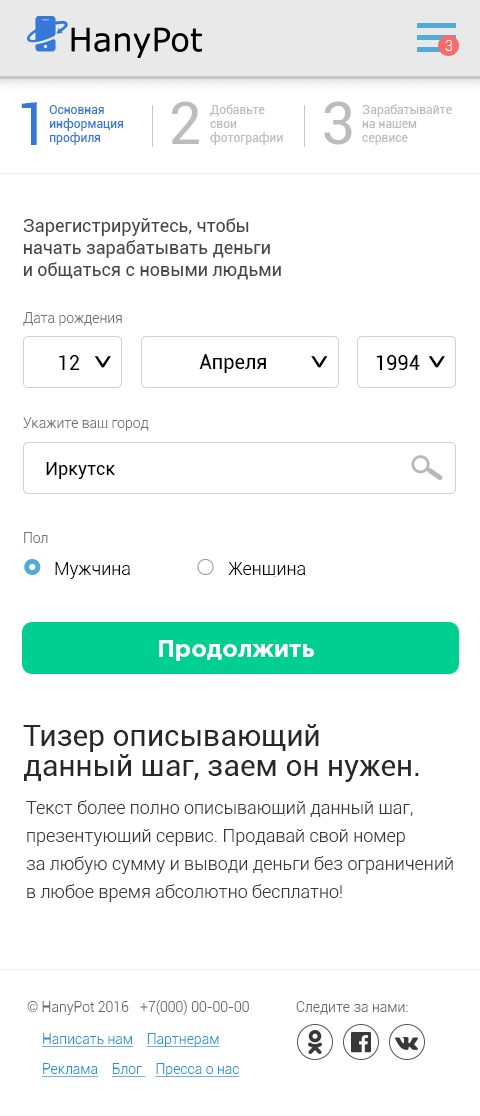
<style>
.page{position:relative;width:480px;height:1116px;background:#ffffff}
.page>*{position:absolute;margin:0}
.t1{font:14px "Roboto-Light";color:#ffffff}
.t2{font:60px "Roboto-Regular";color:#3678d7}
.t3{font:60px "Roboto-Regular";color:#bcbcbc}
.t4{font:12px "Roboto-Regular";color:#3678d7}
.t5{font:12px "Roboto-Regular";color:#bcbcbc}
.t6{font:18px "Roboto-Regular";color:#464646}
.t7{font:14px "Roboto-Light";color:#727272}
.t8{font:20px "Roboto-Regular";color:#000000}
.t9{font:18px "Roboto-Regular";color:#000000}
.t10{font:18px "Roboto-Light";color:#000000}
.t11{font:24px "GothamPro-Bold";color:#ffffff}
.t12{font:30px/30px "Roboto-Regular";color:#282828}
.t13{font:18px/28px "Roboto-Light";color:#393939}
.t14{font:14px "Roboto-Light";color:#696969}
.t15{font:14px/30px "Roboto-Light";color:#2196d1;text-decoration:underline}
.t16{font:14px "Roboto-Light";color:#2196d1;text-decoration:underline}
</style>
<div class="page">
<p class="t1" style="left:445px;top:40px;width:8px;height:11px">3</p>
<p class="t2" style="left:21px;top:102px;width:16px;height:43px">1</p>
<p class="t3" style="left:172px;top:101px;width:27px;height:43px">2</p>
<p class="t3" style="left:324px;top:101px;width:28px;height:44px">3</p>
<p class="t4" style="left:49px;top:105px;width:74px;height:40px">Основная <br>информация <br>профиля</p>
<p class="t5" style="left:210px;top:104px;width:73px;height:41px">Добавьте<br>свои<br>фотографии</p>
<p class="t5" style="left:362px;top:104px;width:90px;height:41px">Зарабатывайте<br>на нашем <br>сервисе</p>
<p class="t6" style="left:23px;top:218px;width:258px;height:62px">Зарегистрируйтесь, чтобы <br>начать зарабатывать деньги<br>и общаться с новыми людьми</p>
<p class="t7" style="left:23px;top:312px;width:99px;height:14px">Дата рождения</p>
<p class="t8" style="left:59px;top:355px;width:21px;height:15px">12</p>
<p class="t8" style="left:199px;top:354px;width:67px;height:19px">Апреля</p>
<p class="t8" style="left:376px;top:355px;width:44px;height:15px">1994</p>
<p class="t7" style="left:23px;top:417px;width:126px;height:14px">Укажите ваш город</p>
<p class="t9" style="left:46px;top:462px;width:69px;height:17px">Иркутск</p>
<p class="t7" style="left:24px;top:532px;width:24px;height:11px">Пол</p>
<p class="t10" style="left:55px;top:562px;width:75px;height:17px">Мужчина</p>
<p class="t10" style="left:228px;top:562px;width:78px;height:15px">Женщина</p>
<p class="t11" style="left:159px;top:640px;width:155px;height:21px">Продолжить</p>
<p class="t12" style="left:23px;top:724px;width:396px;height:58px">Тизер описывающий<br>данный шаг, заем он нужен.</p>
<p class="t13" style="left:26px;top:800px;width:427px;height:102px">Текст более полно описывающий данный шаг, <br>презентующий сервис. Продавай свой номер <br>за любую сумму и выводи деньги без ограничений <br>в любое время абсолютно бесплатно!</p>
<p class="t14" style="left:27px;top:1001px;width:102px;height:14px">© HanyPot 2016</p>
<p class="t14" style="left:140px;top:1000px;width:109px;height:15px">+7(000) 00-00-00</p>
<p class="t14" style="left:296px;top:1001px;width:112px;height:14px">Следите за нами:</p>
<p class="t15" style="left:42px;top:1033px;width:198px;height:44px"><span class="t16">Написать нам    </span>Партнерам    <br>Реклама    Блог    Пресса о нас</p>
</div>
